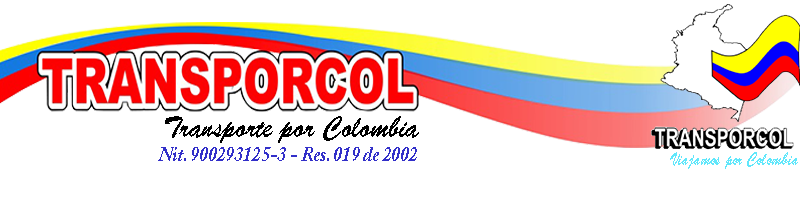
<style>
.page{position:relative;width:800px;height:200px;background:#ffffff}
.page>*{position:absolute;margin:0}
.t1{font:30px "BrushScriptStd";color:#000000;scale:0.87 1}
.t2{font:21px "ACaslonPro-BoldItalic";color:#322fc9;scale:0.85 1}
.t3{font:18px "BrushScriptStd";color:#60e7fb;scale:0.77 1}
</style>
<div class="page">
<p class="t1" style="left:165px;top:116px;width:254px;height:27px">Transporte por Colombia</p>
<p class="t2" style="left:158px;top:147px;width:259px;height:14px">Nit. 900293125-3 - Res. 019 de 2002</p>
<p class="t3" style="left:670px;top:152px;width:128px;height:17px">Viajamos por Colombia</p>
</div>
